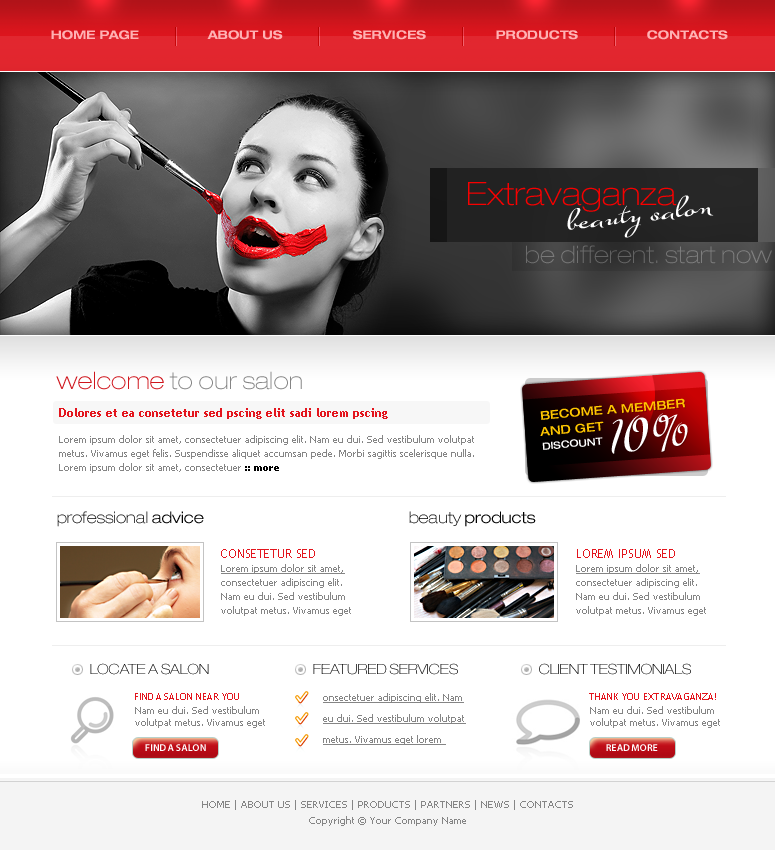
<style>
.page{position:relative;width:775px;height:850px;background:#ffffff}
.page>*{position:absolute;margin:0}
.t1{font:12px "HelveticaNeueLTPro-BdEx";color:#ffb1b3}
.t2{font:32.2px "HelveticaNeueLTPro-ThEx";color:#f80000}
.t3{font:32.2px "SuaveScriptAlt-Bold";color:#ffffff}
.t4{font:24px "HelveticaNeueLTPro-ThEx";color:#717171}
.t5{font:24px "HelveticaNeueLTPro-ThEx";color:#858585}
.t6{font:24px "HelveticaNeueLTPro-ThEx";color:#cf151c}
.t7{font:12.2px "HelveticaNeueLTPro-MdEx";color:#ffc600;text-transform:uppercase}
.t8{font:10px/14px "Tahoma";color:#858585}
.t9{font:12px/12px "TrebuchetMS-Bold";color:#e3151d}
.t10{font:10px/14px "Tahoma-Bold";color:#000000}
.t11{font:60.2px "SuaveScriptAlt-Bold";color:#ffffff}
.t12{font:10px "HelveticaNeueLTPro-MdEx";color:#ffffff;text-transform:uppercase}
.t13{font:16px "HelveticaNeueLTPro-ThEx";color:#000000}
.t14{font:16px "HelveticaNeueLTPro-LtEx";color:#000000}
.t15{font:12px/12px "TrebuchetMS";color:#e3151d;text-transform:uppercase}
.t16{font:10px/14px "Tahoma";color:#858585;text-decoration:underline}
.t17{font:14px "HelveticaNeueLTPro-ThEx";color:#000000;text-transform:uppercase}
.t18{font:14px "HelveticaNeueLTPro-ThEx";text-transform:uppercase}
.t19{font:10px "TrebuchetMS";color:#e3151d;text-transform:uppercase}
.t20{font:10px/21px "Tahoma";color:#858585;text-decoration:underline}
.t21{font:10px/12px "Tahoma";color:#858585}
.t22{font:10px "MyriadPro-Semibold";color:#ffffff}
.t23{font:10px/16px "Tahoma";color:#858585}
</style>
<div class="page">
<p class="t1" style="left:51px;top:30px;width:88px;height:10px">HOME PAGE</p>
<p class="t1" style="left:207px;top:30px;width:76px;height:10px">ABOUT US</p>
<p class="t1" style="left:353px;top:30px;width:73px;height:10px">SERVICES</p>
<p class="t1" style="left:496px;top:30px;width:82px;height:10px">PRODUCTS</p>
<p class="t1" style="left:647px;top:30px;width:81px;height:10px">CONTACTS</p>
<p class="t2" style="left:468px;top:182px;width:209px;height:30px">Extravaganza</p>
<p class="t3" style="left:567px;top:195px;width:147px;height:43px;rotate:-7deg">beauty salon</p>
<p class="t4" style="left:526px;top:245px;width:246px;height:19px">be different. start now</p>
<p class="t5" style="left:56px;top:371px;width:246px;height:19px"><span class="t6">welcome </span>to our salon</p>
<p class="t7" style="left:540px;top:398px;width:146px;height:22px;rotate:-5deg">BECOME A MEMBER</p>
<p class="t8" style="left:59px;top:408px;width:415px;height:65px"><span class="t9">Dolores et ea consetetur sed pscing elit sadi lorem pscing <br><br></span>Lorem ipsum dolor sit amet, consectetuer adipiscing elit. Nam eu dui. Sed vestibulum volutpat metus. Vivamus eget felis. Suspendisse aliquet accumsan pede. Morbi sagittis scelerisque nulla. Lorem ipsum dolor sit amet, consectetuer <span class="t10">:: more</span></p>
<p class="t11" style="left:611px;top:413px;width:77px;height:41px;rotate:-7deg">10%</p>
<p class="t7" style="left:540px;top:421px;width:64px;height:15px;rotate:-5deg">AND GET</p>
<p class="t12" style="left:542px;top:437px;width:61px;height:13px;rotate:-5deg">DISCOUNT</p>
<p class="t13" style="left:57px;top:511px;width:147px;height:16px">professional <span class="t14">advice</span></p>
<p class="t14" style="left:409px;top:511px;width:127px;height:16px"><span class="t13">beauty </span>products</p>
<p class="t8" style="left:221px;top:549px;width:130px;height:67px"><span class="t15">Consetetur sed <br></span><span class="t16">Lorem ipsum dolor sit amet,</span> consectetuer adipiscing elit. Nam eu dui. Sed vestibulum volutpat metus. Vivamus eget</p>
<p class="t8" style="left:576px;top:549px;width:130px;height:67px"><span class="t15">LOREM IPSUM sed <br></span><span class="t16">Lorem ipsum dolor sit amet,</span> consectetuer adipiscing elit. Nam eu dui. Sed vestibulum volutpat metus. Vivamus eget</p>
<p class="t17" style="left:90px;top:663px;width:119px;height:12px">locate a Salon</p>
<p class="t18" style="left:313px;top:663px;width:145px;height:12px">featured services</p>
<p class="t17" style="left:539px;top:663px;width:152px;height:12px">client testimonials</p>
<p class="t19" style="left:135px;top:693px;width:104px;height:7px">find a salon near you</p>
<p class="t20" style="left:323px;top:693px;width:143px;height:52px">onsectetuer adipiscing elit. Nam eu dui. Sed vestibulum volutpat metus. Vivamus eget lorem</p>
<p class="t19" style="left:589px;top:693px;width:127px;height:7px">THANK YOU EXTRAVAGANZA!</p>
<p class="t21" style="left:135px;top:706px;width:130px;height:22px">Nam eu dui. Sed vestibulum volutpat metus. Vivamus eget</p>
<p class="t21" style="left:590px;top:706px;width:130px;height:22px">Nam eu dui. Sed vestibulum volutpat metus. Vivamus eget</p>
<p class="t22" style="left:145px;top:744px;width:61px;height:7px">FIND A SALON</p>
<p class="t22" style="left:606px;top:744px;width:52px;height:7px">READ MORE</p>
<p class="t23" style="left:202px;top:800px;width:371px;height:26px;text-align:center">HOME | ABOUT US | SERVICES | PRODUCTS | PARTNERS | NEWS | CONTACTS<br>Copyright © Your Company Name</p>
</div>
